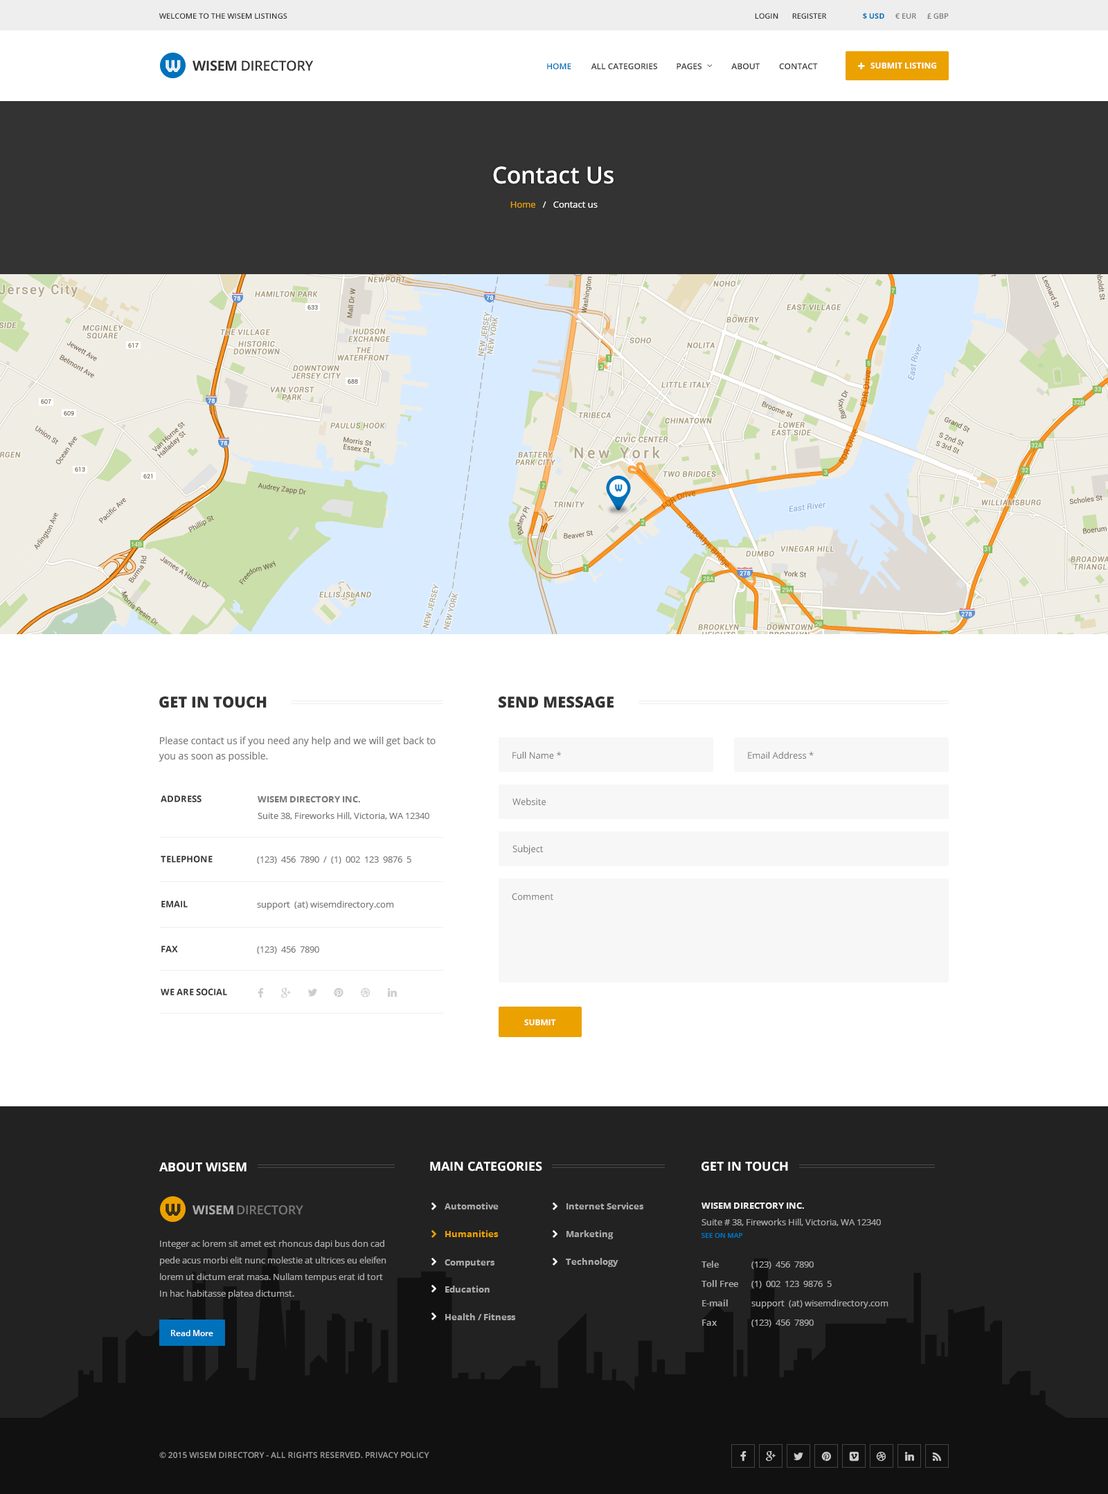
<style>
.page{position:relative;width:1108px;height:1494px;background:#ffffff}
.page>*{position:absolute;margin:0}
.t1{font:7.6px "OpenSans-Semibold";color:#333333;text-transform:uppercase}
.t2{font:7.6px "OpenSans-Bold";color:#0072bc;text-transform:uppercase}
.t3{font:7.6px "OpenSans-Semibold";color:#777777;text-transform:uppercase}
.t4{font:13.8px "OpenSans-Semibold";letter-spacing:-0.025em;color:#333333;text-transform:uppercase}
.t5{font:13.8px "OpenSans-Bold";letter-spacing:-0.025em;color:#333333;text-transform:uppercase}
.t6{font:8.3px "OpenSans-Semibold";color:#0072bc;text-transform:uppercase}
.t7{font:8.3px "OpenSans-Semibold";color:#333333;text-transform:uppercase}
.t8{font:8.3px "OpenSans-Bold";color:#ffffff;text-transform:uppercase}
.t9{font:23.5px "OpenSans-Semibold";color:#ffffff}
.t10{font:9px "OpenSans";color:#ffffff}
.t11{font:9px "OpenSans";color:#eba100}
.t12{font:15.2px "OpenSans-Extrabold";color:#333333;text-transform:uppercase}
.t13{font:9.7px/15.2px "OpenSans";color:#777777}
.t14{font:9px "OpenSans";color:#777777}
.t15{font:9px "OpenSans-Bold";color:#333333}
.t16{font:9px/16.6px "OpenSans";color:#777777}
.t17{font:9px/16.6px "OpenSans-Bold";color:#777777}
.t18{font:9px "OpenSans-Bold";color:#333333;text-transform:uppercase}
.t19{font:8.3px "OpenSans-Bold";letter-spacing:-0.01em;color:#ffffff;text-transform:uppercase}
.t20{font:12.5px "OpenSans-Bold";color:#ffffff;text-transform:uppercase}
.t21{font:12.5px "OpenSans-Bold";color:#ffffff}
.t22{font:12.5px "OpenSans-Bold";color:#aaaaaa;text-transform:uppercase}
.t23{font:12.5px "OpenSans-Semibold";letter-spacing:-0.01em;color:#777777;text-transform:uppercase}
.t24{font:9px "OpenSans-Bold";color:#aaaaaa}
.t25{font:9px/16.6px "OpenSans";color:#aaaaaa}
.t26{font:9px/16.6px "OpenSans-Bold";color:#eeeeee}
.t27{font:9px "OpenSans-Bold";color:#eba100}
.t28{font:6.9px "OpenSans-Semibold";color:#0072bc;text-transform:uppercase}
.t29{font:9px/19.4px "OpenSans-Semibold";color:#aaaaaa}
.t30{font:9px/19.4px "OpenSans";color:#aaaaaa}
.t31{font:8.3px "OpenSans-Semibold";color:#ffffff}
.t32{font:8.3px "OpenSans-Semibold";letter-spacing:-0.01em;color:#999999;text-transform:uppercase}
</style>
<div class="page">
<p class="t1" style="left:159px;top:13px;width:128px;height:6px">Welcome to the Wisem listings</p>
<p class="t1" style="left:755px;top:13px;width:23px;height:6px">LOGIN</p>
<p class="t1" style="left:792px;top:13px;width:35px;height:6px">register</p>
<p class="t2" style="left:863px;top:12px;width:21px;height:7px">$ USD</p>
<p class="t3" style="left:895px;top:13px;width:21px;height:6px">€ EUR</p>
<p class="t3" style="left:927px;top:13px;width:21px;height:6px">£ GBP</p>
<p class="t4" style="left:192px;top:60px;width:122px;height:11px"><span class="t5">wisem</span> directory</p>
<p class="t6" style="left:547px;top:63px;width:24px;height:6px">HOME</p>
<p class="t7" style="left:591px;top:63px;width:66px;height:6px">All categories</p>
<p class="t7" style="left:676px;top:63px;width:25px;height:6px">Pages</p>
<p class="t7" style="left:731px;top:63px;width:28px;height:6px">About</p>
<p class="t7" style="left:779px;top:63px;width:39px;height:6px">Contact</p>
<p class="t8" style="left:870px;top:62px;width:66px;height:7px">Submit Listing</p>
<p class="t9" style="left:493px;top:166px;width:120px;height:18px">Contact Us</p>
<p class="t10" style="left:510px;top:201px;width:87px;height:7px"><span class="t11">Home</span>   /   Contact us</p>
<p class="t12" style="left:159px;top:696px;width:108px;height:12px">get in touch</p>
<p class="t12" style="left:498px;top:696px;width:115px;height:12px">send message</p>
<p class="t13" style="left:159px;top:737px;width:276px;height:25px">Please contact us if you need any help and we will get back to<br>you as soon as possible.</p>
<p class="t14" style="left:512px;top:751px;width:49px;height:8px">Full Name *</p>
<p class="t14" style="left:748px;top:751px;width:65px;height:8px">Email Address *</p>
<p class="t15" style="left:161px;top:795px;width:40px;height:7px">ADDRESS</p>
<p class="t16" style="left:258px;top:796px;width:171px;height:24px"><span class="t17">WISEM DIRECTORY INC.<br></span>Suite 38, Fireworks Hill, Victoria, WA 12340</p>
<p class="t14" style="left:512px;top:798px;width:34px;height:7px">Website</p>
<p class="t14" style="left:512px;top:845px;width:31px;height:9px">Subject</p>
<p class="t18" style="left:161px;top:856px;width:52px;height:7px">Telephone</p>
<p class="t14" style="left:257px;top:856px;width:154px;height:8px">(123)  456  7890  /  (1)  002  123  9876  5</p>
<p class="t14" style="left:512px;top:893px;width:41px;height:7px">Comment</p>
<p class="t18" style="left:161px;top:901px;width:27px;height:7px">EMAIL</p>
<p class="t14" style="left:257px;top:901px;width:137px;height:9px">support  (at) wisemdirectory.com</p>
<p class="t18" style="left:161px;top:946px;width:17px;height:7px">Fax</p>
<p class="t14" style="left:257px;top:946px;width:62px;height:8px">(123)  456  7890</p>
<p class="t18" style="left:161px;top:989px;width:66px;height:7px">we are SOCIAL</p>
<p class="t19" style="left:524px;top:1019px;width:32px;height:6px">SUBMIT</p>
<p class="t20" style="left:159px;top:1162px;width:87px;height:10px">About wisem</p>
<p class="t20" style="left:430px;top:1162px;width:112px;height:9px">main categories</p>
<p class="t21" style="left:701px;top:1162px;width:87px;height:9px">GET IN TOUCH</p>
<p class="t22" style="left:192px;top:1205px;width:41px;height:10px">wisem</p>
<p class="t23" style="left:237px;top:1205px;width:66px;height:10px">directory</p>
<p class="t24" style="left:444px;top:1203px;width:54px;height:6px">Automotive</p>
<p class="t24" style="left:566px;top:1203px;width:78px;height:6px">Internet Services</p>
<p class="t25" style="left:701px;top:1203px;width:180px;height:23px"><span class="t26">WISEM DIRECTORY INC.<br></span>Suite # 38, Fireworks Hill, Victoria, WA 12340</p>
<p class="t25" style="left:160px;top:1240px;width:226px;height:59px">Integer ac lorem sit amet est rhoncus dapi bus don cad<br>pede acus morbi elit nunc molestie at ultrices eu eleifen<br>lorem ut dictum erat masa. Nullam tempus erat id tort<br>In hac habitasse platea dictumst.</p>
<p class="t27" style="left:445px;top:1230px;width:53px;height:7px">Humanities</p>
<p class="t24" style="left:566px;top:1230px;width:47px;height:9px">Marketing</p>
<p class="t28" style="left:701px;top:1233px;width:41px;height:5px">see on map</p>
<p class="t24" style="left:444px;top:1259px;width:51px;height:9px">Computers</p>
<p class="t24" style="left:566px;top:1258px;width:52px;height:9px">Technology</p>
<p class="t29" style="left:701px;top:1261px;width:37px;height:65px">Tele<br>Toll Free<br>E-mail<br>Fax</p>
<p class="t30" style="left:751px;top:1261px;width:137px;height:66px">(123)  456  7890<br>(1)  002  123  9876  5<br>support  (at) wisemdirectory.com<br>(123)  456  7890</p>
<p class="t24" style="left:445px;top:1286px;width:44px;height:7px">Education</p>
<p class="t24" style="left:445px;top:1313px;width:71px;height:7px">Health / Fitness</p>
<p class="t31" style="left:171px;top:1330px;width:42px;height:6px">Read More</p>
<p class="t32" style="left:159px;top:1452px;width:204px;height:6px">© 2015 Wisem Directory - All Rights Reserved.</p>
<p class="t32" style="left:366px;top:1452px;width:63px;height:6px">Privacy Policy</p>
</div>
